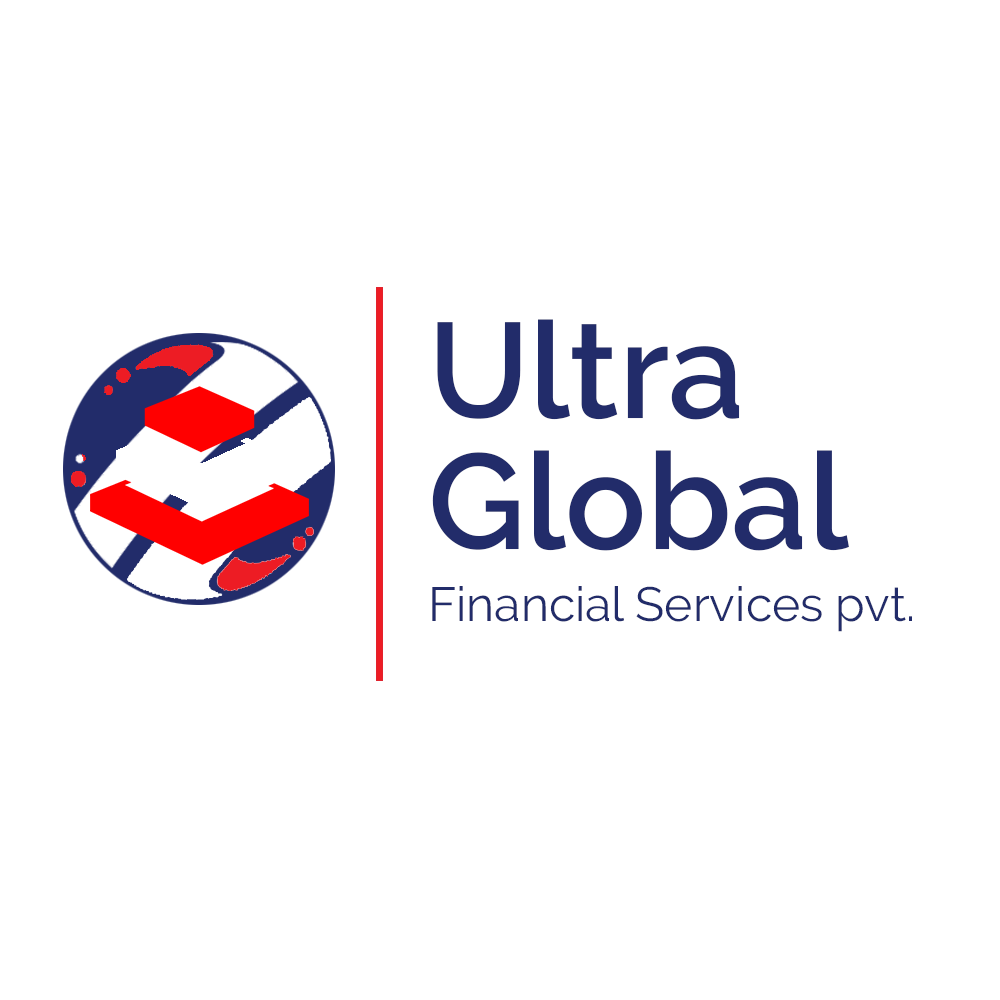
<style>
.page{position:relative;width:1000px;height:1000px;background:#ffffff}
.page>*{position:absolute;margin:0}
.t1{font:48px/72px "Raleway-Regular";color:#222c6a}
.t2{font:135px/131px "Raleway-SemiBold";color:#222c6a}
</style>
<div class="page">
<p class="t1" style="left:432px;top:319px;width:480px;height:313px"><span class="t2">Ultra <br>Global <br></span>Financial Services pvt.</p>
</div>
